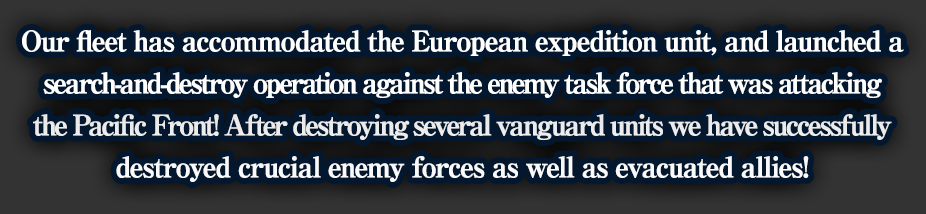
<style>
.page{position:relative;width:926px;height:214px;background:#03172f}
.page>*{position:absolute;margin:0}
.t1{font:28px/42px "RyuminPro-ExBold";letter-spacing:-0.12em;color:#ffffff;font-weight:bold}
.t2{font:28px/42px "RyuminPro-ExBold";letter-spacing:-0.08em;color:#ffffff;font-weight:bold}
</style>
<div class="page">
<p class="t1" style="left:22px;top:30px;width:882px;height:152px;text-align:center"><span class="t2">Our fleet has accommodated the European expedition unit, and launched a<br></span>search-and-destroy operation against the enemy task force that was attacking<br>the Pacific Front! After destroying several vanguard units we have successfully<br><span class="t2">destroyed crucial enemy forces as well as evacuated allies!</span></p>
</div>
